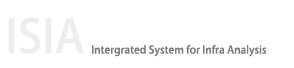
<style>
.page{position:relative;width:294px;height:68px;background:#ffffff}
.page>*{position:absolute;margin:0}
.t1{font:45.3px "AdobeHeitiStd-Regular";color:#ededed;text-transform:uppercase}
.t2{font:10.6px "AdobeHeitiStd-Regular";color:#7b7b7b}
</style>
<div class="page">
<p class="t1" style="left:8px;top:17px;width:76px;height:37px">ISIA</p>
<p class="t2" style="left:92px;top:44px;width:175px;height:13px">Intergrated System for Infra Analysis</p>
</div>
